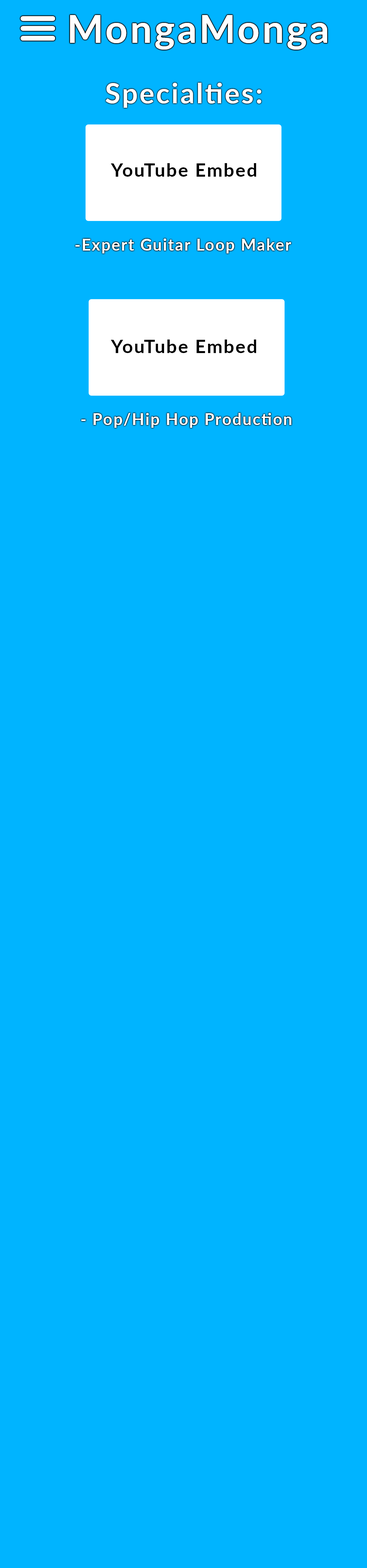
<style>
.page{position:relative;width:367px;height:1568px;background:#00b4ff}
.page>*{position:absolute;margin:0}
.t1{font:38.3px "Lato-Bold";letter-spacing:0.065em;color:#ffffff}
.t2{font:27.6px "Lato-Bold";letter-spacing:0.065em;color:#ffffff}
.t3{font:18.5px "Lato-Bold";letter-spacing:0.065em;color:#000000}
.t4{font:16px "Lato-Bold";letter-spacing:0.065em;color:#ffffff}
</style>
<div class="page">
<p class="t1" style="left:70px;top:15px;width:257px;height:35px">MongaMonga</p>
<p class="t2" style="left:106px;top:83px;width:155px;height:25px">Specialties:</p>
<p class="t3" style="left:111px;top:163px;width:145px;height:14px">YouTube Embed</p>
<p class="t4" style="left:75px;top:238px;width:216px;height:15px">-Expert Guitar Loop Maker</p>
<p class="t3" style="left:111px;top:340px;width:145px;height:13px">YouTube Embed</p>
<p class="t4" style="left:81px;top:413px;width:210px;height:15px">- Pop/Hip Hop Production</p>
</div>
